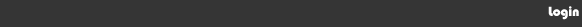
<style>
.page{position:relative;width:582px;height:27px;background:#353535}
.page>*{position:absolute;margin:0}
.t1{font:14px "Bauhaus93";letter-spacing:-0.02em;color:#ffffff}
</style>
<div class="page">
<p class="t1" style="left:548px;top:6px;width:31px;height:14px">Login</p>
</div>
